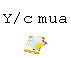
<style>
.page{position:relative;width:71px;height:58px;background:#ffffff}
.page>*{position:absolute;margin:0}
.t1{font:16px "CourierNewPSMT";color:#000000}
</style>
<div class="page">
<p class="t1" style="left:3px;top:12px;width:64px;height:12px">Y/c mua</p>
</div>
